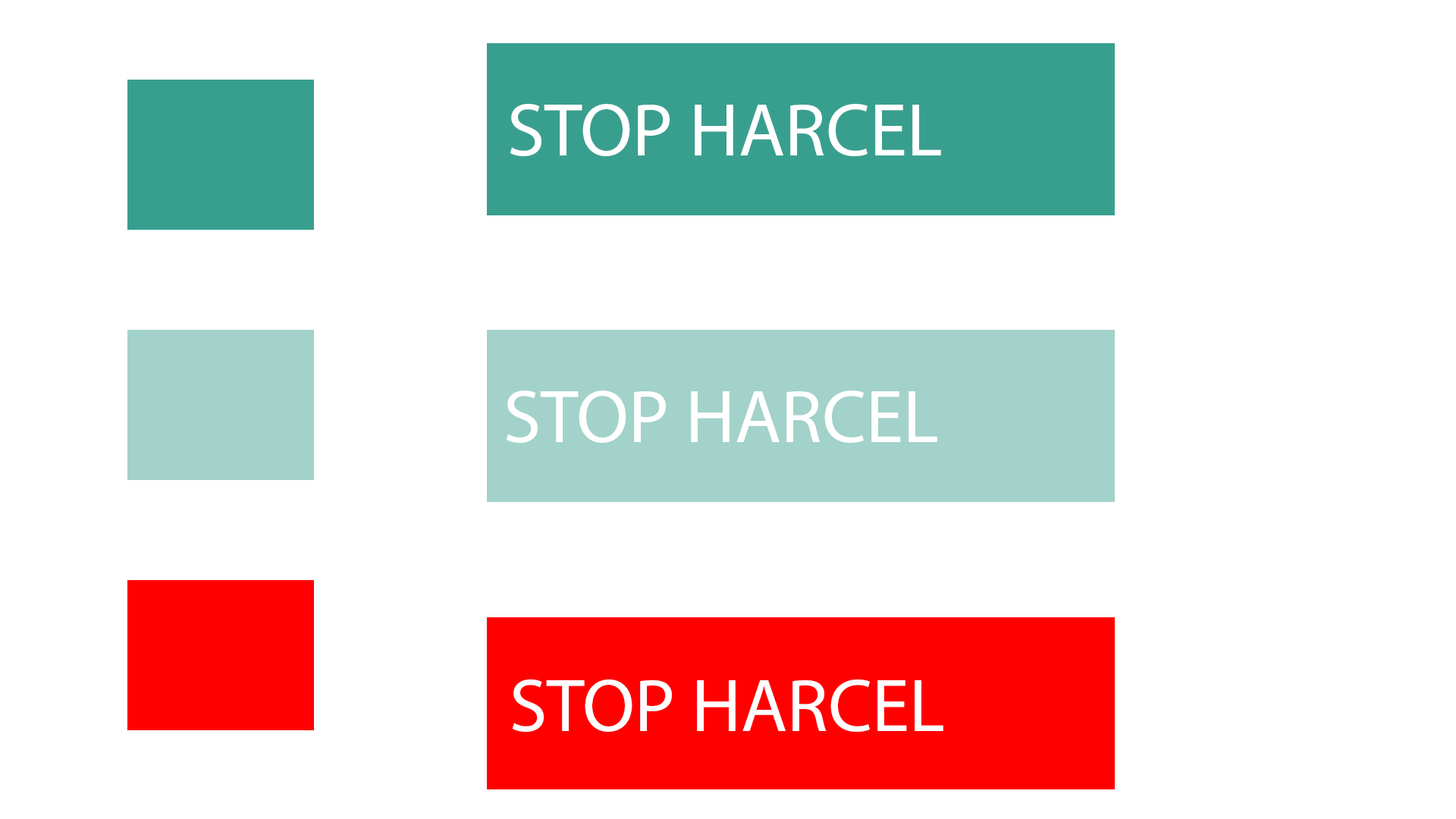
<style>
.page{position:relative;width:1456px;height:819px;background:#ffffff}
.page>*{position:absolute;margin:0}
.t1{font:75.8px "MyriadPro-Regular";color:#ffffff}
</style>
<div class="page">
<p class="t1" style="left:510px;top:104px;width:431px;height:52px">STOP HARCEL</p>
<p class="t1" style="left:506px;top:391px;width:431px;height:52px">STOP HARCEL</p>
<p class="t1" style="left:512px;top:679px;width:431px;height:53px">STOP HARCEL</p>
</div>
